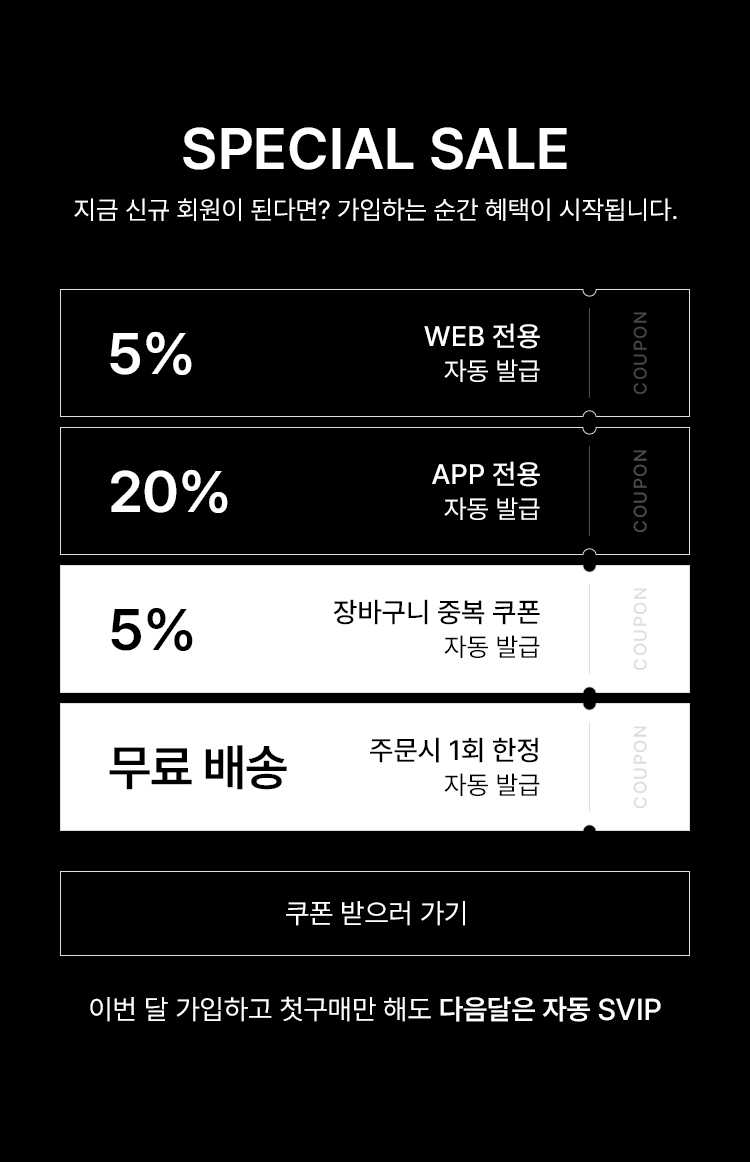
<style>
.page{position:relative;width:750px;height:1162px;background:#000000}
.page>*{position:absolute;margin:0}
.t1{font:58px "Pretendard-SemiBold";color:#ffffff;text-transform:uppercase}
.t2{font:26px "Pretendard-Regular";color:#ffffff;text-transform:uppercase}
.t3{font:18px "Pretendard-Medium";letter-spacing:0.07em;color:#454545;text-transform:uppercase}
.t4{font:28px/36px "Pretendard-Medium";color:#ffffff;text-transform:uppercase}
.t5{font:26px/36px "Pretendard-Regular";color:#ffffff;text-transform:uppercase}
.t6{font:58px "Pretendard-SemiBold";letter-spacing:-0.01em;color:#ffffff;text-transform:uppercase}
.t7{font:18px "Pretendard-Medium";letter-spacing:0.07em;color:#4b4b4b;text-transform:uppercase}
.t8{font:18px "Pretendard-Medium";letter-spacing:0.07em;color:#dddddd;text-transform:uppercase}
.t9{font:28px/36px "Pretendard-Medium";color:#000000;text-transform:uppercase}
.t10{font:26px/36px "Pretendard-Regular";color:#000000;text-transform:uppercase}
.t11{font:58px "Pretendard-SemiBold";letter-spacing:-0.01em;color:#000000;text-transform:uppercase}
.t12{font:50px "Pretendard-SemiBold";letter-spacing:-0.02em;color:#000000;text-transform:uppercase}
.t13{font:28px "Pretendard-Regular";color:#ffffff;text-transform:uppercase}
.t14{font:28px "Pretendard-SemiBold";color:#ffffff;text-transform:uppercase}
.t15{font:30px "Pretendard-Medium";color:#ffffff;text-transform:uppercase}
</style>
<div class="page">
<p class="t1" style="left:183px;top:127px;width:384px;height:43px">SPECIAL sale</p>
<p class="t1" style="left:183px;top:127px;width:384px;height:43px">SPECIAL sale</p>
<p class="t2" style="left:74px;top:198px;width:603px;height:23px">지금 신규 회원이 된다면? 가입하는 순간 혜택이 시작됩니다.</p>
<p class="t2" style="left:74px;top:198px;width:603px;height:23px">지금 신규 회원이 된다면? 가입하는 순간 혜택이 시작됩니다.</p>
<p class="t3" style="left:633px;top:312px;width:14px;height:82px;rotate:-90deg">coupon</p>
<p class="t3" style="left:633px;top:312px;width:14px;height:82px;rotate:-90deg">coupon</p>
<p class="t4" style="left:424px;top:323px;width:116px;height:59px;text-align:right">web 전용<br><span class="t5"> 자동 발급</span></p>
<p class="t4" style="left:424px;top:323px;width:116px;height:59px;text-align:right">web 전용<br><span class="t5"> 자동 발급</span></p>
<p class="t6" style="left:110px;top:331px;width:82px;height:44px">5%</p>
<p class="t6" style="left:110px;top:331px;width:82px;height:44px">5%</p>
<p class="t4" style="left:432px;top:461px;width:108px;height:59px;text-align:right">app 전용<br><span class="t5"> 자동 발급</span></p>
<p class="t4" style="left:432px;top:461px;width:108px;height:59px;text-align:right">app 전용<br><span class="t5"> 자동 발급</span></p>
<p class="t7" style="left:633px;top:450px;width:14px;height:82px;rotate:-90deg">coupon</p>
<p class="t7" style="left:633px;top:450px;width:14px;height:82px;rotate:-90deg">coupon</p>
<p class="t6" style="left:111px;top:469px;width:117px;height:44px">20%</p>
<p class="t6" style="left:111px;top:469px;width:117px;height:44px">20%</p>
<p class="t8" style="left:633px;top:588px;width:14px;height:82px;rotate:-90deg">coupon</p>
<p class="t8" style="left:633px;top:588px;width:14px;height:82px;rotate:-90deg">coupon</p>
<p class="t9" style="left:333px;top:599px;width:207px;height:59px;text-align:right">장바구니 중복 쿠폰<br><span class="t10"> 자동 발급</span></p>
<p class="t9" style="left:333px;top:599px;width:207px;height:59px;text-align:right">장바구니 중복 쿠폰<br><span class="t10"> 자동 발급</span></p>
<p class="t11" style="left:111px;top:607px;width:82px;height:44px">5%</p>
<p class="t11" style="left:111px;top:607px;width:82px;height:44px">5%</p>
<p class="t8" style="left:633px;top:726px;width:14px;height:82px;rotate:-90deg">coupon</p>
<p class="t8" style="left:633px;top:726px;width:14px;height:82px;rotate:-90deg">coupon</p>
<p class="t9" style="left:370px;top:737px;width:170px;height:59px;text-align:right">주문시 1회 한정<br><span class="t10">자동 발급</span></p>
<p class="t9" style="left:370px;top:737px;width:170px;height:59px;text-align:right">주문시 1회 한정<br><span class="t10">자동 발급</span></p>
<p class="t12" style="left:109px;top:745px;width:178px;height:45px">무료 배송</p>
<p class="t12" style="left:109px;top:745px;width:178px;height:45px">무료 배송</p>
<p class="t13" style="left:286px;top:901px;width:179px;height:25px">쿠폰 받으러 가기</p>
<p class="t13" style="left:286px;top:901px;width:179px;height:25px">쿠폰 받으러 가기</p>
<p class="t13" style="left:90px;top:996px;width:571px;height:26px">이번 달 가입하고 첫구매만 해도 <span class="t14">다음달은 자동 </span><span class="t15">svip</span></p>
<p class="t13" style="left:90px;top:996px;width:571px;height:26px">이번 달 가입하고 첫구매만 해도 <span class="t14">다음달은 자동 </span><span class="t15">svip</span></p>
</div>
